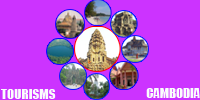
<style>
.page{position:relative;width:200px;height:100px;background:#cc33ff}
.page>*{position:absolute;margin:0}
.t1{font:13.2px "Impact";color:#fafefd}
.t2{font:12.7px "Impact";color:#fafefd}
</style>
<div class="page">
<p class="t1" style="left:1px;top:89px;width:55px;height:10px">TOURISMS</p>
<p class="t2" style="left:146px;top:88px;width:54px;height:10px">CAMBODIA</p>
</div>
